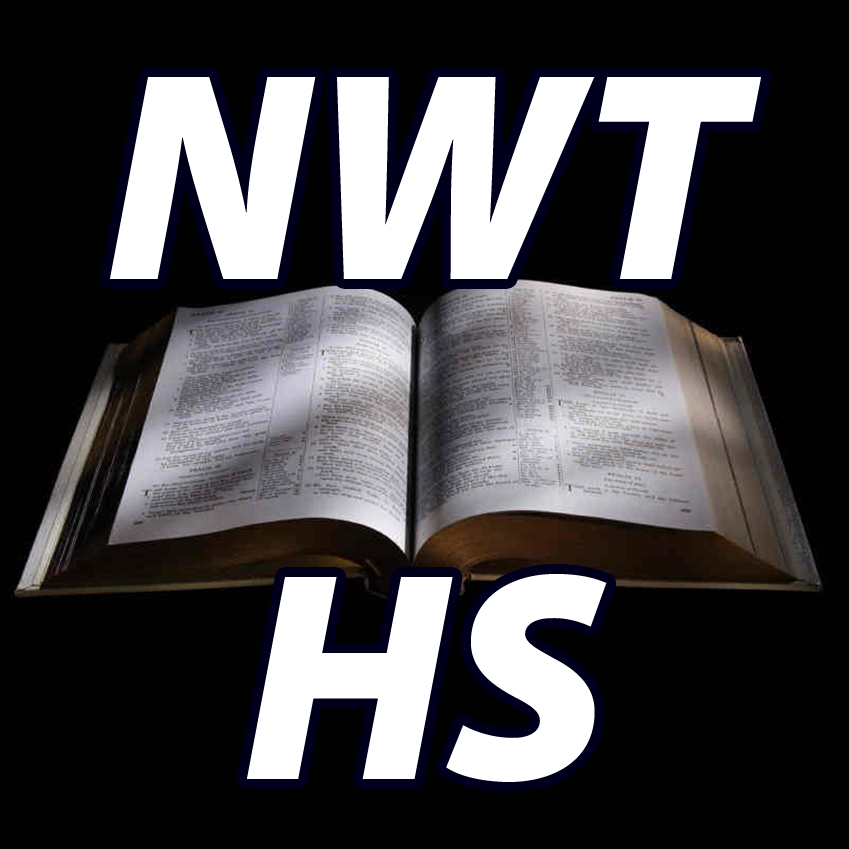
<style>
.page{position:relative;width:849px;height:849px;background:#010101}
.page>*{position:absolute;margin:0}
.t1{font:300px/500px "MyriadPro-BlackIt";color:#ffffff;text-transform:uppercase}
</style>
<div class="page">
<p class="t1" style="left:110px;top:77px;width:651px;height:705px;text-align:center">NWT<br>HS</p>
</div>
